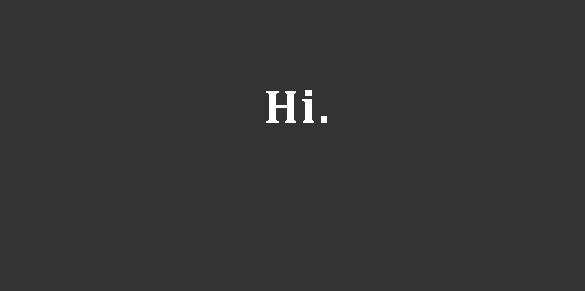
<style>
.page{position:relative;width:585px;height:291px;background:#333333}
.page>*{position:absolute;margin:0}
.t1{font:48px "Cambria-Bold";letter-spacing:0.05em;color:#ffffff}
</style>
<div class="page">
<p class="t1" style="left:266px;top:90px;width:61px;height:33px">Hi.</p>
</div>
